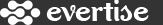
<style>
.page{position:relative;width:163px;height:25px;background:#333333}
.page>*{position:absolute;margin:0}
.t1{font:41px "DreamwoodDEMO-Regular";color:#ffffff;scale:0.87 1}
</style>
<div class="page">
<p class="t1" style="left:46px;top:0px;width:103px;height:21px">evertise</p>
</div>
